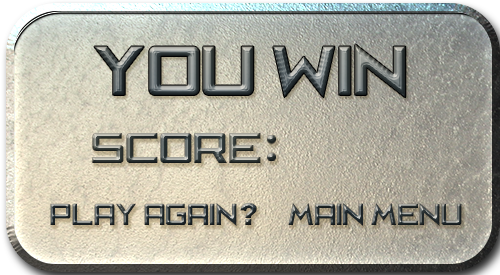
<style>
.page{position:relative;width:500px;height:275px}
.page>*{position:absolute;margin:0}
.t1{font:64px "CafeNeroM54"}
.t2{font:60px "CafeNeroM54"}
.t3{font:39.6px "CafeNeroM54"}
.t4{font:28px "CafeNeroM54";scale:0.92 1}
.t5{font:30px "Arial-Black"}
</style>
<div class="page">
<p class="t1" style="left:94px;top:44px;width:312px;height:54px">You Win<span class="t2">!</span></p>
<p class="t3" style="left:92px;top:133px;width:169px;height:30px">score</p>
<p class="t4" style="left:50px;top:203px;width:412px;height:23px">Play Again        Main Menu</p>
<p class="t5" style="left:240px;top:203px;width:17px;height:22px">?</p>
</div>
